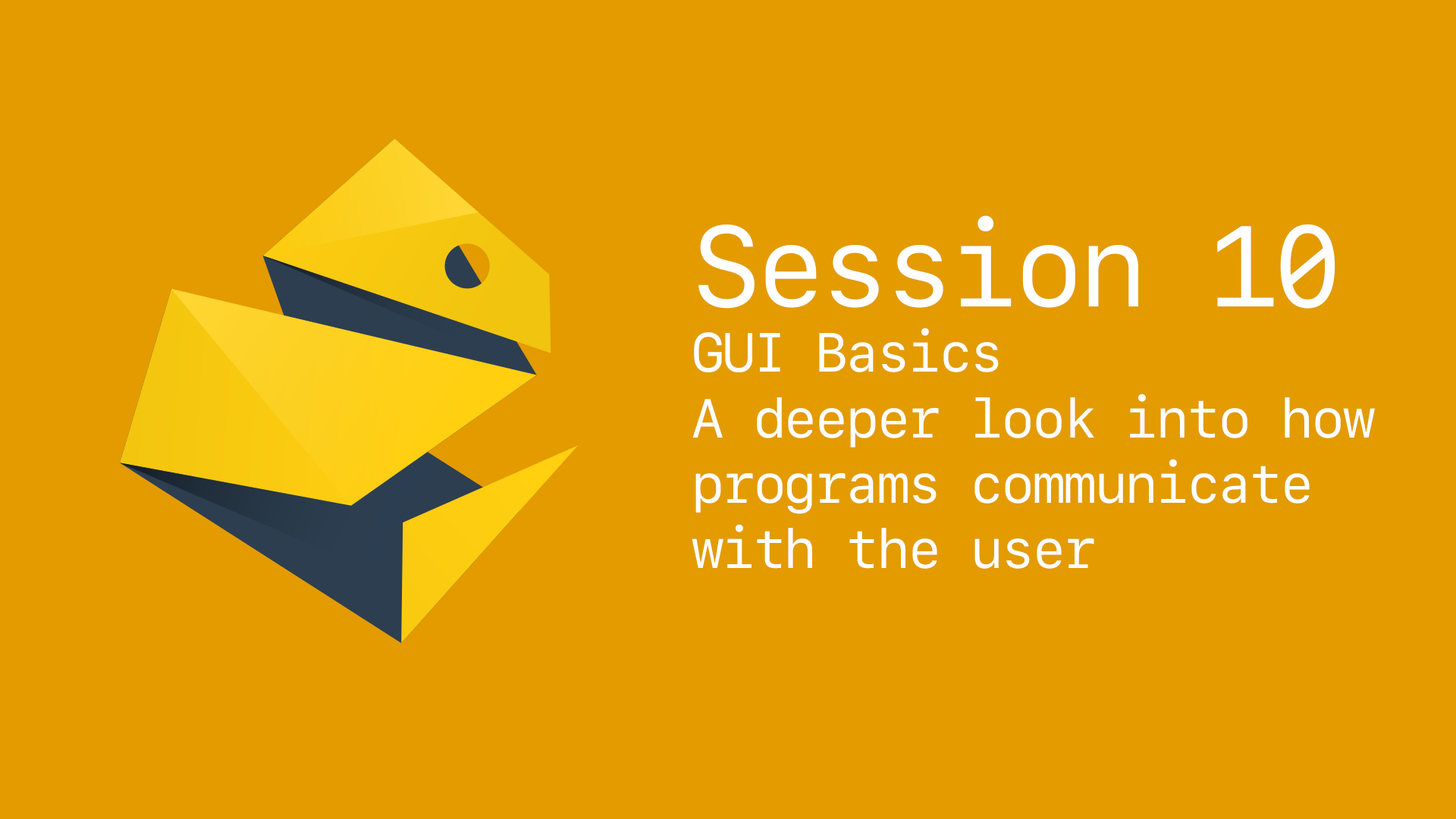
<style>
.page{position:relative;width:1456px;height:819px;background:#e39b00}
.page>*{position:absolute;margin:0}
.t1{font:54.6px "SFMono-Regular";letter-spacing:-0.05em;color:#ffffff}
.t2{font:113.7px "SFMono-Regular";letter-spacing:-0.05em;color:#ffffff}
</style>
<div class="page">
<p class="t1" style="left:692px;top:215px;width:683px;height:354px"><span class="t2">Session 10<br></span>GUI Basics<br>A deeper look into how programs communicate with the user</p>
</div>
